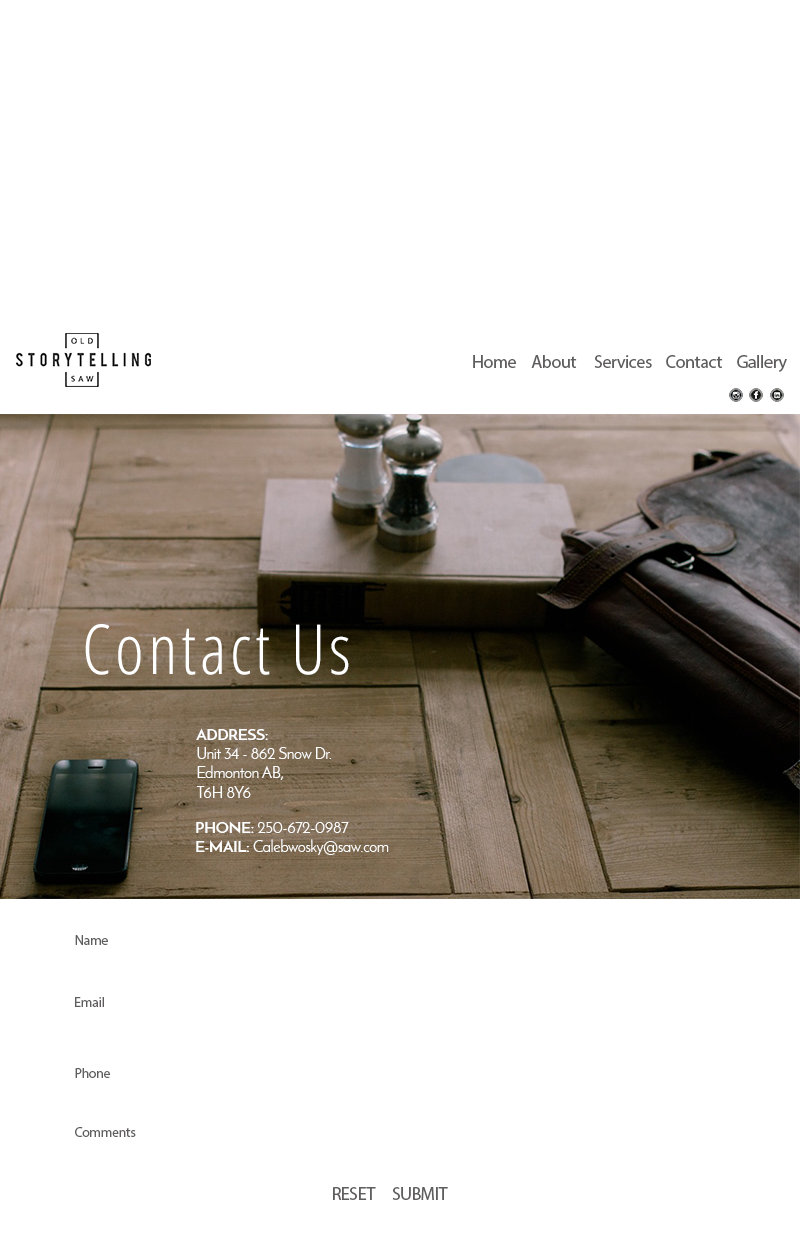
<style>
.page{position:relative;width:800px;height:1248px;background:#ffffff}
.page>*{position:absolute;margin:0}
.t1{font:18px "MyriadPro-Regular";letter-spacing:-0.025em;color:#5f5d5d}
.t2{font:69px "OpenSans-CondensedLight";letter-spacing:0.055em;color:#ffffff}
.t3{font:16px "JosefinSans";letter-spacing:-0.025em;color:#ffffff}
.t4{font:16px "JosefinSans-Bold";letter-spacing:-0.025em;color:#ffffff}
.t5{font:14px "MyriadPro-Regular";letter-spacing:-0.025em;color:#5f5d5d}
</style>
<div class="page">
<p class="t1" style="left:473px;top:355px;width:43px;height:13px">Home</p>
<p class="t1" style="left:531px;top:355px;width:46px;height:13px">About</p>
<p class="t1" style="left:594px;top:355px;width:58px;height:13px">Services</p>
<p class="t1" style="left:666px;top:355px;width:57px;height:13px">Contact</p>
<p class="t1" style="left:737px;top:355px;width:50px;height:17px">Gallery</p>
<p class="t2" style="left:85px;top:624px;width:264px;height:51px">Contact Us</p>
<p class="t3" style="left:196px;top:728px;width:136px;height:70px"><span class="t4">ADDRESS:<br></span>Unit 34 - 862 Snow Dr.<br>Edmonton AB,<br>T6H 8Y6</p>
<p class="t3" style="left:196px;top:821px;width:193px;height:34px"><span class="t4">PHONE:</span> 250-672-0987<br><span class="t4">E-MAIL:</span> Calebwosky@saw.com</p>
<p class="t5" style="left:75px;top:935px;width:33px;height:10px">Name</p>
<p class="t5" style="left:75px;top:997px;width:29px;height:10px">Email</p>
<p class="t5" style="left:75px;top:1068px;width:35px;height:10px">Phone</p>
<p class="t5" style="left:75px;top:1127px;width:61px;height:10px">Comments</p>
<p class="t1" style="left:333px;top:1187px;width:43px;height:13px">RESET</p>
<p class="t1" style="left:392px;top:1187px;width:56px;height:13px">SUBMIT</p>
</div>
